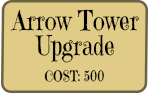
<style>
.page{position:relative;width:150px;height:95px;background:#e0cc87}
.page>*{position:absolute;margin:0}
.t1{font:27.4px/25.3px "EmilysCandy-Regular";color:#000000;scale:0.83 1}
.t2{font:14.5px "EmilysCandy-Regular";color:#000000;scale:0.83 1}
</style>
<div class="page">
<p class="t1" style="left:10px;top:9px;width:129px;height:54px;text-align:center">Arrow Tower<br>Upgrade</p>
<p class="t2" style="left:44px;top:69px;width:60px;height:13px">COST: 500</p>
</div>
